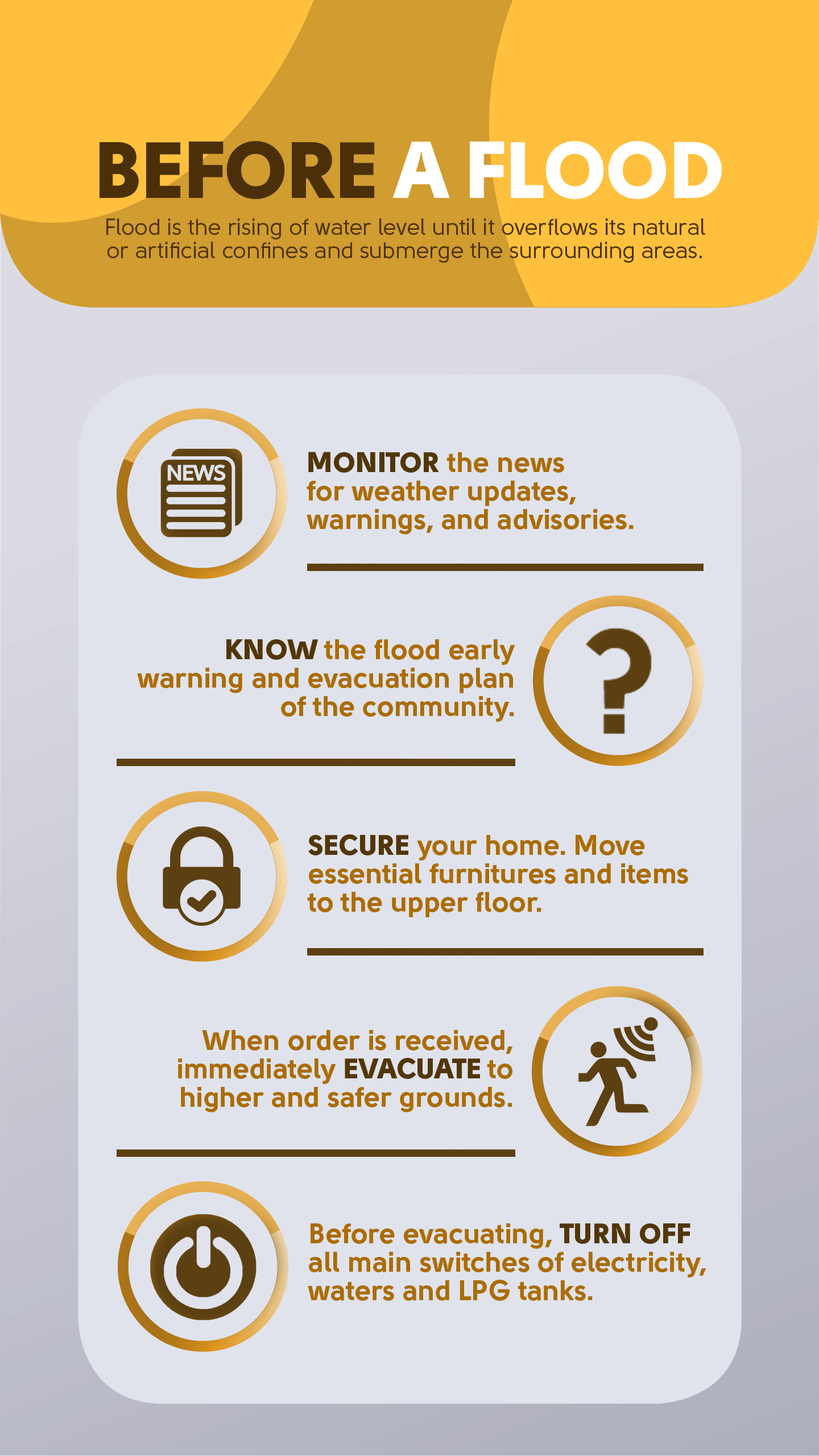
<style>
.page{position:relative;width:819px;height:1456px;background:#e0e3ec}
.page>*{position:absolute;margin:0}
.t1{font:79.6px "Solomon-Sans-Black";color:#ffffff}
.t2{font:79.6px "Solomon-Sans-Black";color:#4a2f08}
.t3{font:22.7px/23.3px "Solomon-Sans-Normal";color:#4c330a}
.t4{font:28.4px/28.4px "Solomon-Sans-Bold";color:#ab6c03}
.t5{font:28.4px/28.4px "Solomon-Sans-Black";color:#523606}
</style>
<div class="page">
<p class="t1" style="left:100px;top:141px;width:622px;height:58px"><span class="t2">BEFORE </span>A FLOOD</p>
<p class="t3" style="left:106px;top:218px;width:599px;height:45px;text-align:center">Flood is the rising of water level until it overflows its natural<br>or artificial confines and submerge the surrounding areas.</p>
<p class="t4" style="left:307px;top:452px;width:327px;height:83px"><span class="t5">MONITOR </span>the news<br>for weather updates,<br>warnings, and advisories.</p>
<p class="t4" style="left:137px;top:639px;width:378px;height:83px;text-align:right"><span class="t5">KNOW </span>the flood early<br>warning and evacuation plan<br>of the community.</p>
<p class="t4" style="left:307px;top:834px;width:381px;height:83px"><span class="t5">SECURE </span>your home. Move<br>essential furnitures and items<br>to the upper floor.</p>
<p class="t4" style="left:178px;top:1030px;width:335px;height:82px;text-align:right">When order is received,<br>immediately <span class="t5">EVACUATE </span>to<br>higher and safer grounds.</p>
<p class="t4" style="left:308px;top:1223px;width:398px;height:78px">Before evacuating, <span class="t5">TURN OFF<br></span>all main switches of electricity,<br>waters and LPG tanks.</p>
</div>
